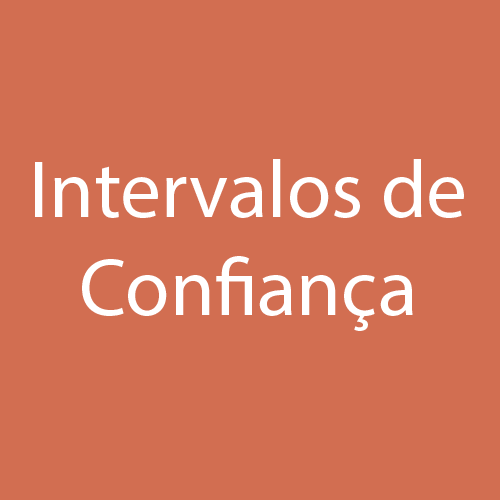
<style>
.page{position:relative;width:500px;height:500px;background:#d26e51}
.page>*{position:absolute;margin:0}
.t1{font:81.3px "MyriadPro-Regular";color:#ffffff}
</style>
<div class="page">
<p class="t1" style="left:35px;top:159px;width:429px;height:172px;text-align:center">Intervalos de<br>Confiança</p>
</div>
